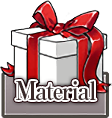
<style>
.page{position:relative;width:112px;height:118px;background:#ffffff}
.page>*{position:absolute;margin:0}
.t1{font:25px "RyuminPro-ExBold";letter-spacing:-0.08em;color:#392828;scale:0.9 1}
</style>
<div class="page">
<p class="t1" style="left:16px;top:81px;width:80px;height:19px">Material</p>
</div>
